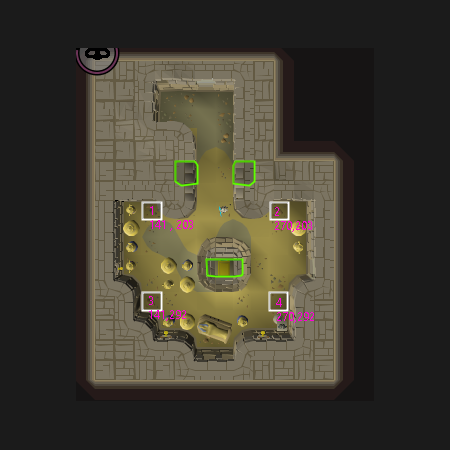
<style>
.page{position:relative;width:450px;height:450px;background:#1b1b1b}
.page>*{position:absolute;margin:0}
.t1{font:12px "SegoeUI";color:#ff00d8}
</style>
<div class="page">
<p class="t1" style="left:150px;top:206px;width:43px;height:25px">1<br>141 , 203</p>
<p class="t1" style="left:275px;top:207px;width:37px;height:25px">2<br>270,203</p>
<p class="t1" style="left:149px;top:296px;width:37px;height:25px">3<br>141,292</p>
<p class="t1" style="left:276px;top:298px;width:38px;height:25px">4<br>270,292</p>
</div>
